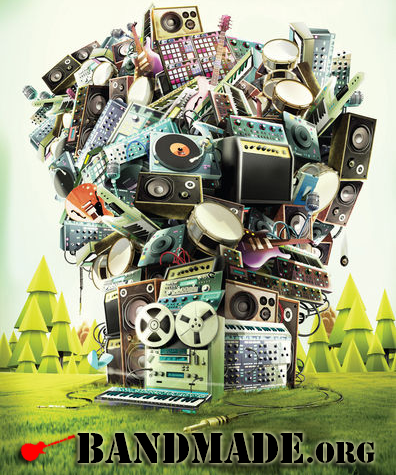
<style>
.page{position:relative;width:396px;height:475px}
.page>*{position:absolute;margin:0}
.t1{font:38.9px "StencilStd";color:#000000}
.t2{font:27.8px "StencilStd";color:#000000}
</style>
<div class="page">
<p class="t1" style="left:77px;top:433px;width:298px;height:30px">BandMade<span class="t2">.org</span></p>
</div>
